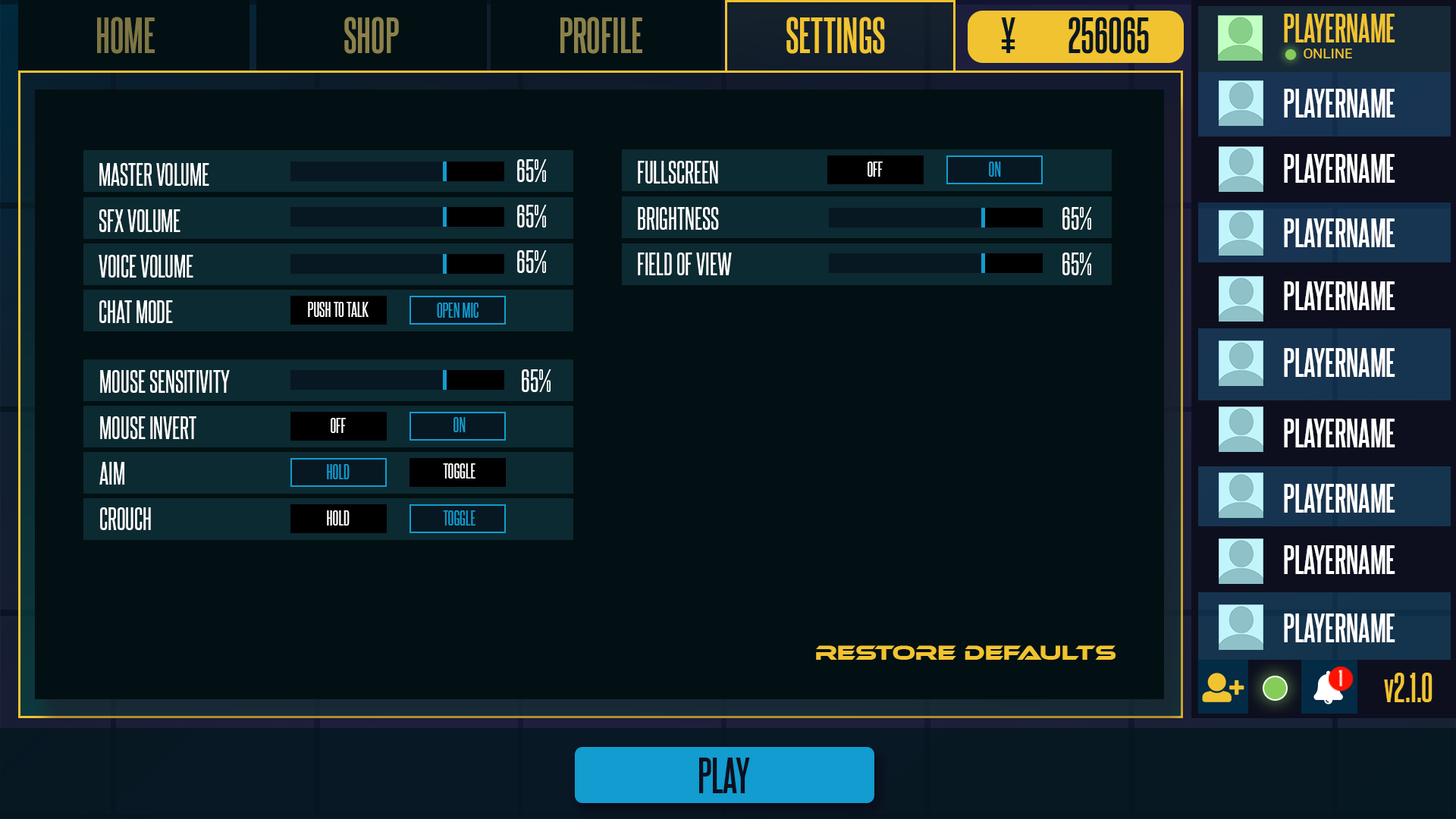
<style>
.page{position:relative;width:1456px;height:819px;background:#021013}
.page>*{position:absolute;margin:0}
.t1{font:43.2px "SteelfishRg-Bold";color:#7e7644}
.t2{font:43.2px "SteelfishRg-Bold";color:#8b814a}
.t3{font:43.2px "SteelfishRg-Bold";color:#f1c330}
.t4{font:43.2px "SteelfishRg-Bold";color:#071824}
.t5{font:34.5px "SteelfishRg-Bold";color:#f1c330}
.t6{font:14.1px "Roboto-Regular";color:#f1c330}
.t7{font:34.5px "SteelfishRg-Bold";color:#ffffff}
.t8{font:27.3px/45.8px "SteelfishRg-Regular";color:#ffffff}
.t9{font:18.2px "SteelfishRg-Regular";color:#ffffff}
.t10{font:18.2px "SteelfishRg-Regular";color:#129ccf}
.t11{font:27.3px "SteelfishRg-Regular";color:#ffffff}
.t12{font:20.8px "EthnocentricRg-Regular";color:#f1c330;scale:1.04 1}
.t13{font:35.8px "SteelfishRg-Bold";color:#f1c330}
.t14{font:43.2px "SteelfishRg-Bold";color:#0d0f1e}
</style>
<div class="page">
<p class="t1" style="left:97px;top:17px;width:58px;height:37px">HOME</p>
<p class="t2" style="left:344px;top:17px;width:55px;height:37px">SHOP</p>
<p class="t2" style="left:560px;top:17px;width:82px;height:37px">PROFILE</p>
<p class="t3" style="left:786px;top:17px;width:99px;height:37px">SETTINGS</p>
<p class="t4" style="left:1001px;top:17px;width:14px;height:36px">¥</p>
<p class="t4" style="left:1068px;top:17px;width:81px;height:37px">256065</p>
<p class="t5" style="left:1284px;top:14px;width:111px;height:28px">PLAYERNAME</p>
<p class="t6" style="left:1304px;top:49px;width:48px;height:9px">ONLINE</p>
<p class="t7" style="left:1284px;top:89px;width:111px;height:29px">PLAYERNAME</p>
<p class="t8" style="left:517px;top:159px;width:30px;height:114px">65%<br>65%<br>65%</p>
<p class="t8" style="left:638px;top:161px;width:94px;height:114px">FULLSCREEN<br>BRIGHTNESS<br>FIELD OF VIEW</p>
<p class="t9" style="left:868px;top:162px;width:15px;height:15px">OFF</p>
<p class="t10" style="left:989px;top:162px;width:12px;height:15px">ON</p>
<p class="t7" style="left:1284px;top:154px;width:111px;height:29px">PLAYERNAME</p>
<p class="t8" style="left:99px;top:163px;width:110px;height:160px">MASTER VOLUME<br>SFX VOLUME<br>VOICE VOLUME<br>CHAT MODE</p>
<p class="t8" style="left:1062px;top:207px;width:30px;height:68px">65%<br>65%</p>
<p class="t7" style="left:1284px;top:218px;width:111px;height:29px">PLAYERNAME</p>
<p class="t7" style="left:1284px;top:281px;width:111px;height:29px">PLAYERNAME</p>
<p class="t9" style="left:308px;top:302px;width:61px;height:15px">PUSH TO TALK</p>
<p class="t10" style="left:437px;top:303px;width:42px;height:15px">OPEN MIC</p>
<p class="t7" style="left:1284px;top:348px;width:111px;height:29px">PLAYERNAME</p>
<p class="t8" style="left:99px;top:370px;width:131px;height:160px">MOUSE SENSITIVITY<br>MOUSE INVERT<br>AIM<br>CROUCH</p>
<p class="t11" style="left:522px;top:369px;width:29px;height:23px">65%</p>
<p class="t9" style="left:331px;top:418px;width:15px;height:15px">OFF</p>
<p class="t10" style="left:453px;top:417px;width:13px;height:15px">ON</p>
<p class="t7" style="left:1284px;top:419px;width:111px;height:28px">PLAYERNAME</p>
<p class="t10" style="left:327px;top:464px;width:23px;height:15px">HOLD</p>
<p class="t9" style="left:443px;top:463px;width:32px;height:16px">TOGGLE</p>
<p class="t7" style="left:1284px;top:484px;width:111px;height:29px">PLAYERNAME</p>
<p class="t9" style="left:327px;top:510px;width:23px;height:16px">HOLD</p>
<p class="t10" style="left:443px;top:510px;width:32px;height:16px">TOGGLE</p>
<p class="t7" style="left:1284px;top:545px;width:111px;height:29px">PLAYERNAME</p>
<p class="t7" style="left:1284px;top:613px;width:111px;height:29px">PLAYERNAME</p>
<p class="t12" style="left:816px;top:645px;width:300px;height:15px">Restore Defaults</p>
<p class="t13" style="left:1384px;top:673px;width:48px;height:29px">v2.1.0</p>
<p class="t14" style="left:699px;top:758px;width:51px;height:35px">PLAY</p>
</div>
